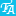
<style>
.page{position:relative;width:16px;height:16px;background:#0ebfe9}
.page>*{position:absolute;margin:0}
.t1{font:12.6px "Apple-Chancery";color:#ffffff}
</style>
<div class="page">
<p class="t1" style="left:0px;top:0px;width:13px;height:12px">T</p>
<p class="t1" style="left:6px;top:5px;width:10px;height:9px">A</p>
</div>
